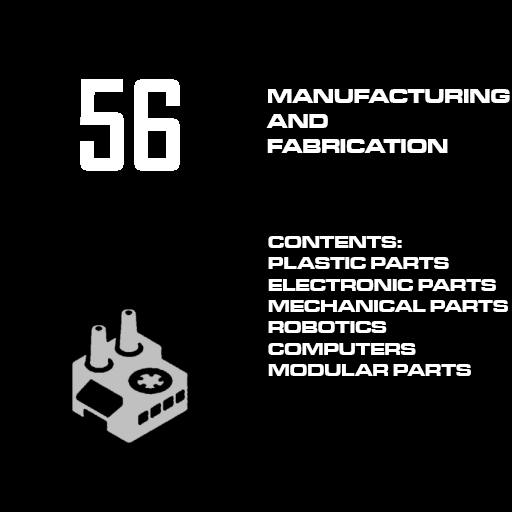
<style>
.page{position:relative;width:512px;height:512px;background:#000000}
.page>*{position:absolute;margin:0}
.t1{font:20.7px "MicrogrammaD-BoldExte";color:#ffffff}
.t2{font:17.8px "MicrogrammaD-BoldExte";color:#ffffff}
</style>
<div class="page">
<p class="t1" style="left:266px;top:89px;width:244px;height:64px">MANUFACTURING<br>AND<br>FABRICATION</p>
<p class="t2" style="left:268px;top:236px;width:240px;height:140px">CONTENTS:<br>PLASTIC PARTS<br>ELECTRONIC PARTS<br>MECHANICAL PARTS<br>ROBOTICS<br>COMPUTERS<br>MODULAR PARTS</p>
</div>
